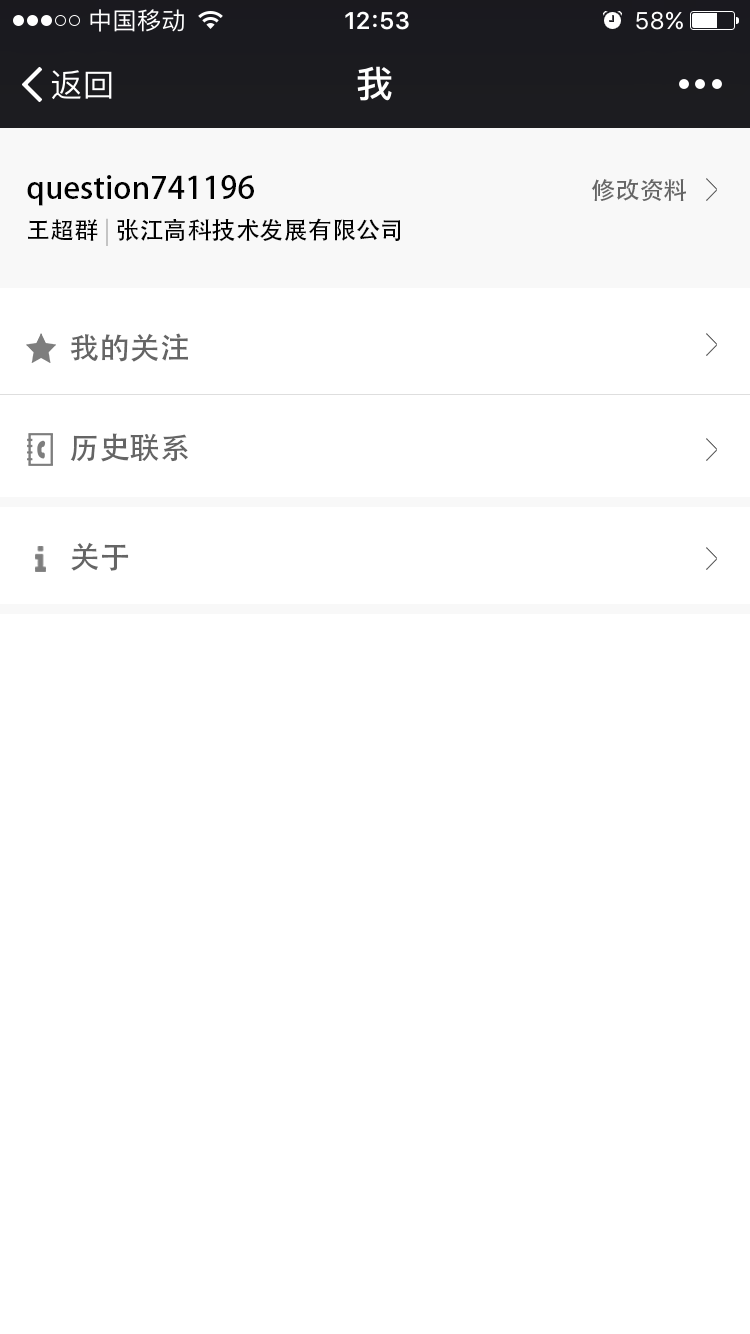
<style>
.page{position:relative;width:750px;height:1334px;background:#ffffff}
.page>*{position:absolute;margin:0}
.t1{font:31px "AdobeHeitiStd-Regular";color:#000000}
.t2{font:24.1px "AdobeHeitiStd-Regular";color:#656565}
.t3{font:24px "AdobeHeitiStd-Regular";color:#000000}
.t4{font:24px "AdobeHeitiStd-Regular";color:#c4c4c4}
.t5{font:30px/100px "AdobeHeitiStd-Regular";color:#656565}
.t6{font:30px "AdobeHeitiStd-Regular";color:#656565}
</style>
<div class="page">
<p class="t1" style="left:27px;top:175px;width:227px;height:31px">question741196</p>
<p class="t2" style="left:591px;top:179px;width:95px;height:22px">修改资料</p>
<p class="t3" style="left:28px;top:218px;width:372px;height:28px">王超群 <span class="t4">|</span> 张江高科技术发展有限公司</p>
<p class="t5" style="left:70px;top:333px;width:118px;height:129px">我的关注<br>历史联系</p>
<p class="t6" style="left:71px;top:542px;width:58px;height:29px">关于</p>
</div>
